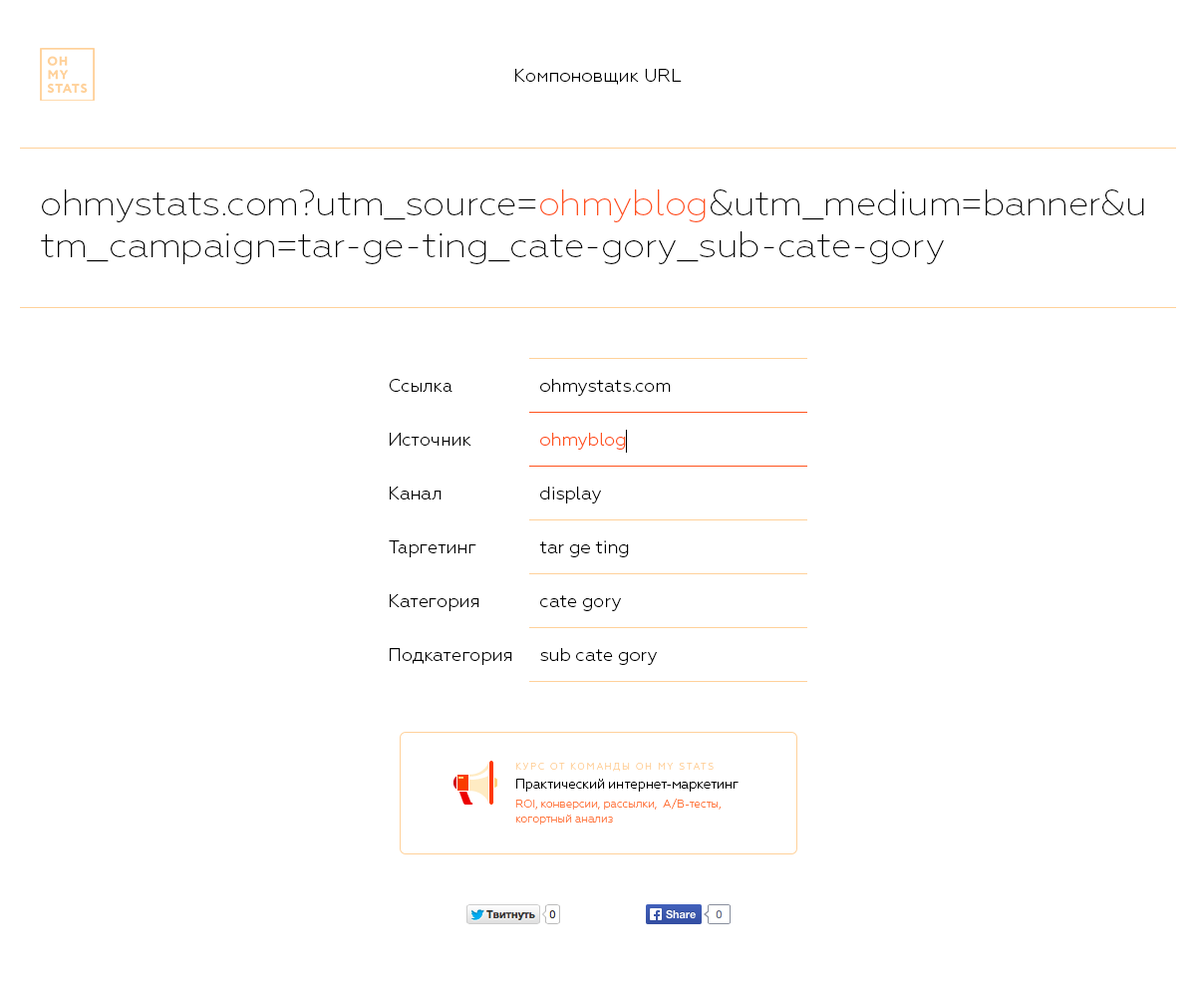
<style>
.page{position:relative;width:1196px;height:997px;background:#ffffff}
.page>*{position:absolute;margin:0}
.t1{font:17.9px "Geometria-Light";letter-spacing:0.005em;color:#000000}
.t2{font:35.9px/41.9px "Geometria-ExtraLight";letter-spacing:-0.005em;color:#000000}
.t3{font:35.9px/41.9px "Geometria-ExtraLight";letter-spacing:-0.005em;color:#ff521d}
.t4{font:17.9px "Geometria-Light";color:#000000}
.t5{font:17.9px "Geometria-Light";color:#ff521d}
.t6{font:11px/15px "Geometria-Light";color:#ff793e}
.t7{font:9px/15px "Geometria-Light";letter-spacing:0.2em;color:#ffd19a}
.t8{font:13px/15px "Geometria-Light";color:#000000}
</style>
<div class="page">
<p class="t1" style="left:515px;top:69px;width:167px;height:16px">Компоновщик URL</p>
<p class="t2" style="left:41px;top:189px;width:1103px;height:75px">ohmystats.com?utm_source=<span class="t3">ohmyblog</span>&amp;utm_medium=banner&amp;utm_campaign=tar-ge-ting_cate-gory_sub-cate-gory</p>
<p class="t4" style="left:389px;top:379px;width:64px;height:13px">Ссылка</p>
<p class="t4" style="left:540px;top:379px;width:131px;height:17px">ohmystats.com</p>
<p class="t4" style="left:390px;top:433px;width:82px;height:13px">Источник</p>
<p class="t5" style="left:540px;top:433px;width:86px;height:17px">ohmyblog</p>
<p class="t4" style="left:390px;top:486px;width:52px;height:13px">Канал</p>
<p class="t4" style="left:540px;top:486px;width:61px;height:17px">display</p>
<p class="t4" style="left:389px;top:540px;width:87px;height:17px">Таргетинг</p>
<p class="t4" style="left:539px;top:540px;width:90px;height:17px">tar ge ting</p>
<p class="t4" style="left:390px;top:594px;width:89px;height:17px">Категория</p>
<p class="t4" style="left:540px;top:595px;width:81px;height:16px">cate gory</p>
<p class="t4" style="left:390px;top:648px;width:122px;height:17px">Подкатегория</p>
<p class="t4" style="left:540px;top:648px;width:117px;height:17px">sub cate gory</p>
<p class="t6" style="left:515px;top:763px;width:224px;height:61px"><span class="t7">КУРС ОТ КОМАНДЫ OH MY STATS<br></span><span class="t8">Практический интернет-маркетинг<br></span>ROI, конверсии, рассылки,  A/B-тесты, когортный анализ</p>
</div>
